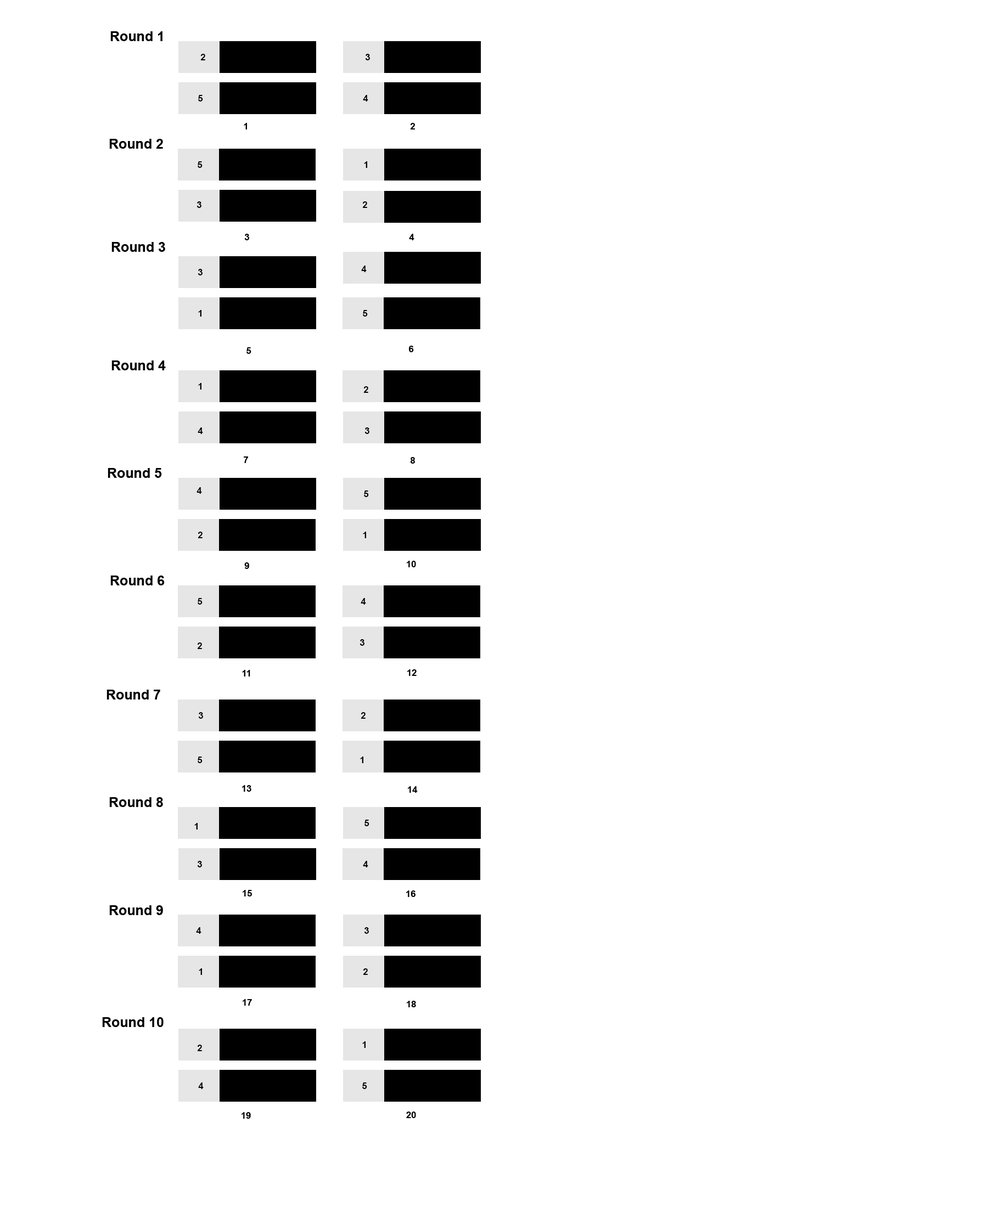
<style>
.page{position:relative;width:988px;height:1207px;background:#ffffff}
.page>*{position:absolute;margin:0}
.t1{font:13.7px "Arial-BoldMT";color:#000000}
.t2{font:9.1px "Arial-BoldMT";color:#000000}
</style>
<div class="page">
<p class="t1" style="left:110px;top:31px;width:52px;height:10px">Round 1</p>
<p class="t2" style="left:200px;top:54px;width:5px;height:6px">2</p>
<p class="t2" style="left:365px;top:54px;width:5px;height:6px">3</p>
<p class="t2" style="left:198px;top:95px;width:5px;height:7px">5</p>
<p class="t2" style="left:363px;top:95px;width:5px;height:7px">4</p>
<p class="t2" style="left:244px;top:123px;width:3px;height:7px">1</p>
<p class="t2" style="left:410px;top:123px;width:5px;height:7px">2</p>
<p class="t1" style="left:109px;top:139px;width:54px;height:10px">Round 2</p>
<p class="t2" style="left:198px;top:161px;width:4px;height:7px">5</p>
<p class="t2" style="left:364px;top:161px;width:3px;height:7px">1</p>
<p class="t2" style="left:196px;top:201px;width:5px;height:7px">3</p>
<p class="t2" style="left:362px;top:201px;width:5px;height:7px">2</p>
<p class="t2" style="left:244px;top:234px;width:5px;height:6px">3</p>
<p class="t2" style="left:409px;top:234px;width:5px;height:6px">4</p>
<p class="t1" style="left:111px;top:242px;width:54px;height:10px">Round 3</p>
<p class="t2" style="left:198px;top:269px;width:4px;height:6px">3</p>
<p class="t2" style="left:361px;top:266px;width:6px;height:6px">4</p>
<p class="t2" style="left:198px;top:310px;width:3px;height:7px">1</p>
<p class="t2" style="left:363px;top:310px;width:5px;height:7px">5</p>
<p class="t2" style="left:246px;top:347px;width:5px;height:7px">5</p>
<p class="t2" style="left:409px;top:346px;width:5px;height:6px">6</p>
<p class="t1" style="left:111px;top:361px;width:55px;height:9px">Round 4</p>
<p class="t2" style="left:198px;top:383px;width:3px;height:7px">1</p>
<p class="t2" style="left:363px;top:386px;width:5px;height:7px">2</p>
<p class="t2" style="left:198px;top:427px;width:5px;height:7px">4</p>
<p class="t2" style="left:364px;top:427px;width:5px;height:7px">3</p>
<p class="t2" style="left:244px;top:457px;width:4px;height:6px">7</p>
<p class="t2" style="left:410px;top:457px;width:5px;height:7px">8</p>
<p class="t1" style="left:108px;top:468px;width:54px;height:10px">Round 5</p>
<p class="t2" style="left:196px;top:487px;width:6px;height:7px">4</p>
<p class="t2" style="left:364px;top:491px;width:5px;height:6px">5</p>
<p class="t2" style="left:198px;top:532px;width:4px;height:6px">2</p>
<p class="t2" style="left:363px;top:532px;width:3px;height:6px">1</p>
<p class="t2" style="left:244px;top:562px;width:5px;height:7px">9</p>
<p class="t2" style="left:407px;top:561px;width:9px;height:6px">10</p>
<p class="t1" style="left:110px;top:576px;width:55px;height:10px">Round 6</p>
<p class="t2" style="left:198px;top:598px;width:4px;height:7px">5</p>
<p class="t2" style="left:361px;top:598px;width:5px;height:7px">4</p>
<p class="t2" style="left:359px;top:639px;width:5px;height:7px">3</p>
<p class="t2" style="left:197px;top:643px;width:5px;height:6px">2</p>
<p class="t2" style="left:242px;top:670px;width:8px;height:7px">11</p>
<p class="t2" style="left:407px;top:669px;width:9px;height:7px">12</p>
<p class="t1" style="left:106px;top:690px;width:54px;height:10px">Round 7</p>
<p class="t2" style="left:198px;top:712px;width:5px;height:7px">3</p>
<p class="t2" style="left:361px;top:712px;width:4px;height:7px">2</p>
<p class="t2" style="left:198px;top:757px;width:4px;height:6px">5</p>
<p class="t2" style="left:360px;top:757px;width:3px;height:6px">1</p>
<p class="t2" style="left:242px;top:785px;width:9px;height:7px">13</p>
<p class="t1" style="left:109px;top:797px;width:54px;height:10px">Round 8</p>
<p class="t2" style="left:408px;top:786px;width:10px;height:7px">14</p>
<p class="t2" style="left:364px;top:820px;width:5px;height:6px">5</p>
<p class="t2" style="left:194px;top:823px;width:4px;height:7px">1</p>
<p class="t2" style="left:197px;top:861px;width:5px;height:7px">3</p>
<p class="t2" style="left:363px;top:861px;width:5px;height:7px">4</p>
<p class="t2" style="left:243px;top:890px;width:9px;height:7px">15</p>
<p class="t2" style="left:406px;top:891px;width:9px;height:6px">16</p>
<p class="t1" style="left:109px;top:905px;width:54px;height:10px">Round 9</p>
<p class="t2" style="left:196px;top:927px;width:5px;height:7px">4</p>
<p class="t2" style="left:364px;top:927px;width:5px;height:7px">3</p>
<p class="t2" style="left:199px;top:969px;width:3px;height:6px">1</p>
<p class="t2" style="left:363px;top:969px;width:5px;height:6px">2</p>
<p class="t2" style="left:243px;top:999px;width:9px;height:7px">17</p>
<p class="t2" style="left:407px;top:1001px;width:9px;height:6px">18</p>
<p class="t1" style="left:102px;top:1017px;width:62px;height:10px">Round 10</p>
<p class="t2" style="left:197px;top:1045px;width:5px;height:6px">2</p>
<p class="t2" style="left:362px;top:1042px;width:3px;height:6px">1</p>
<p class="t2" style="left:198px;top:1083px;width:6px;height:6px">4</p>
<p class="t2" style="left:362px;top:1083px;width:5px;height:6px">5</p>
<p class="t2" style="left:241px;top:1112px;width:10px;height:7px">19</p>
<p class="t2" style="left:406px;top:1112px;width:10px;height:6px">20</p>
</div>
